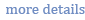
<style>
.page{position:relative;width:85px;height:20px;background:#ffffff}
.page>*{position:absolute;margin:0}
.t1{font:15px "Cambria";color:#718ec3}
</style>
<div class="page">
<p class="t1" style="left:6px;top:4px;width:79px;height:10px">more details</p>
</div>
